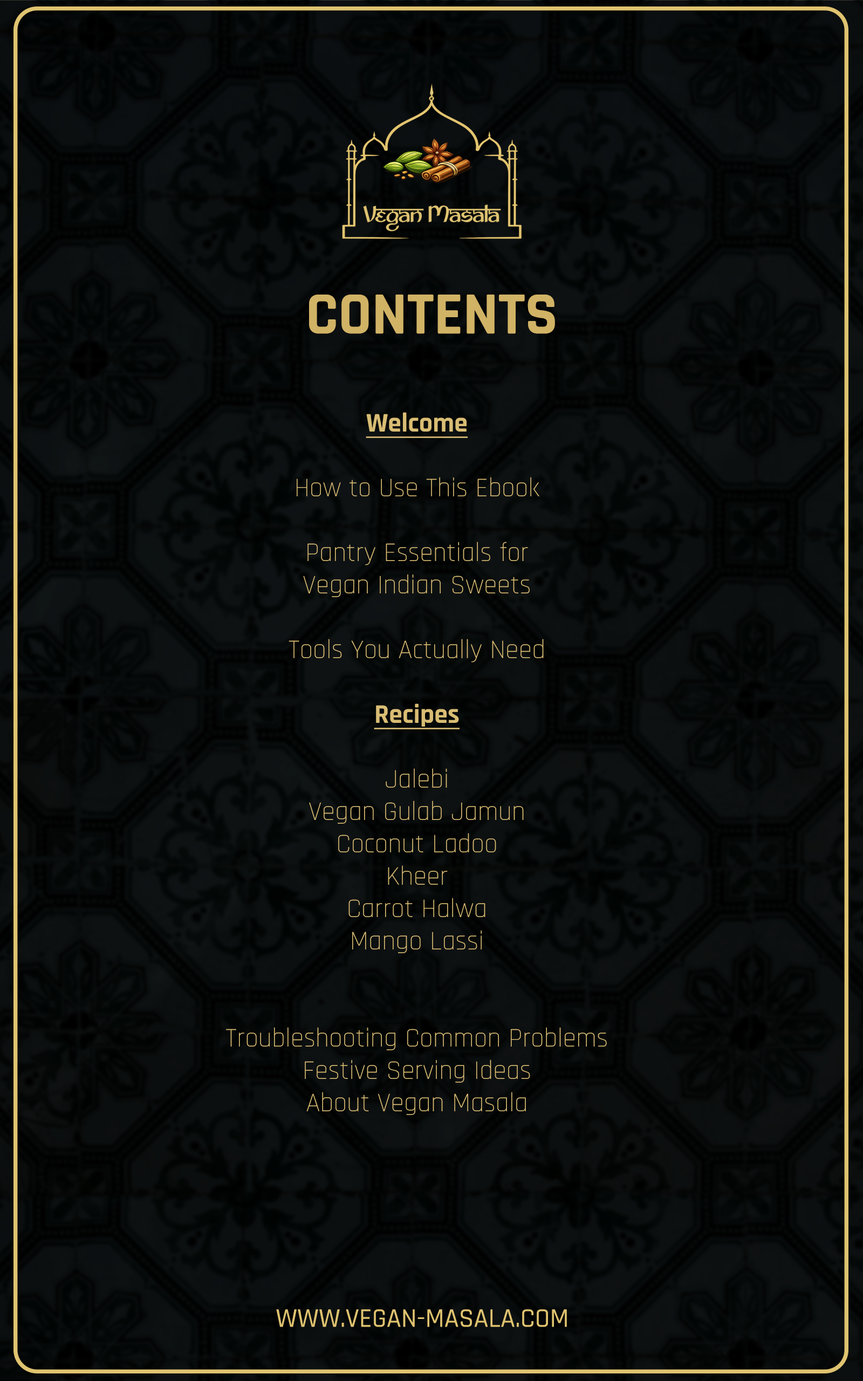
<style>
.page{position:relative;width:863px;height:1381px}
.page>*{position:absolute;margin:0}
.t1{font:60.5px "Rajdhani-Bold";color:#d1b366}
.t2{font:27px "Rajdhani-Light";color:#d9bd74}
.t3{font:27px "Rajdhani-Bold";color:#d9bd74;text-decoration:underline}
.t4{font:27px "Rajdhani-Medium";color:#dfc370}
</style>
<div class="page">
<p class="t1" style="left:309px;top:295px;width:246px;height:39px">CONTENTS</p>
<p class="t2" style="left:226px;top:412px;width:381px;height:703px;text-align:center"><span class="t3">Welcome<br><br></span>How to Use This Ebook<br><br>Pantry Essentials for <br>Vegan Indian Sweets<br><br>Tools You Actually Need<br><br><span class="t3">Recipes<br><br></span>Jalebi<br>Vegan Gulab Jamun<br>Coconut Ladoo<br>Kheer<br>Carrot Halwa<br>Mango Lassi<br><br><br>Troubleshooting Common Problems<br>Festive Serving Ideas<br>About Vegan Masala</p>
<p class="t4" style="left:276px;top:1310px;width:291px;height:17px">WWW.VEGAN-MASALA.COM</p>
</div>
